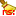
<style>
.page{position:relative;width:16px;height:16px;background:#ffffff}
.page>*{position:absolute;margin:0}
.t1{font:10px "Verdana";letter-spacing:-0.1em;color:#ff0000}
</style>
<div class="page">
<p class="t1" style="left:2px;top:10px;width:13px;height:5px">ns:</p>
</div>
